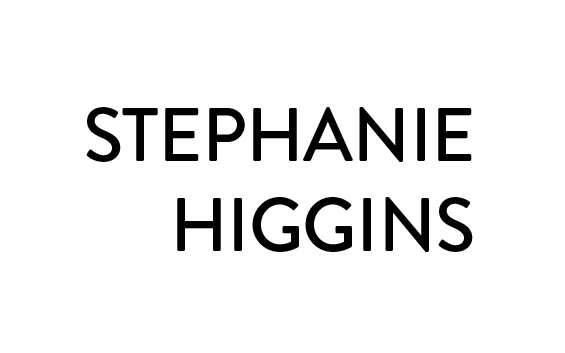
<style>
.page{position:relative;width:565px;height:353px;background:#ffffff}
.page>*{position:absolute;margin:0}
.t1{font:75.3px "BrandonGrotesque-Medium";letter-spacing:-0.01em;color:#000000}
</style>
<div class="page">
<p class="t1" style="left:86px;top:107px;width:387px;height:145px;text-align:right">STEPHANIE<br>HIGGINS</p>
</div>
